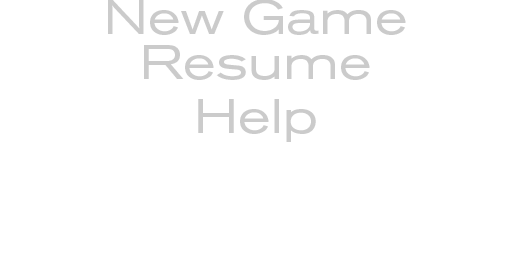
<style>
.page{position:relative;width:512px;height:256px;background:#ffffff}
.page>*{position:absolute;margin:0}
.t1{font:48px "AkzidenzGroteskBE-Ex";color:#cccccc}
</style>
<div class="page">
<p class="t1" style="left:108px;top:0px;width:298px;height:35px">New Game</p>
<p class="t1" style="left:144px;top:45px;width:226px;height:35px">Resume</p>
<p class="t1" style="left:198px;top:99px;width:118px;height:43px">Help</p>
</div>
